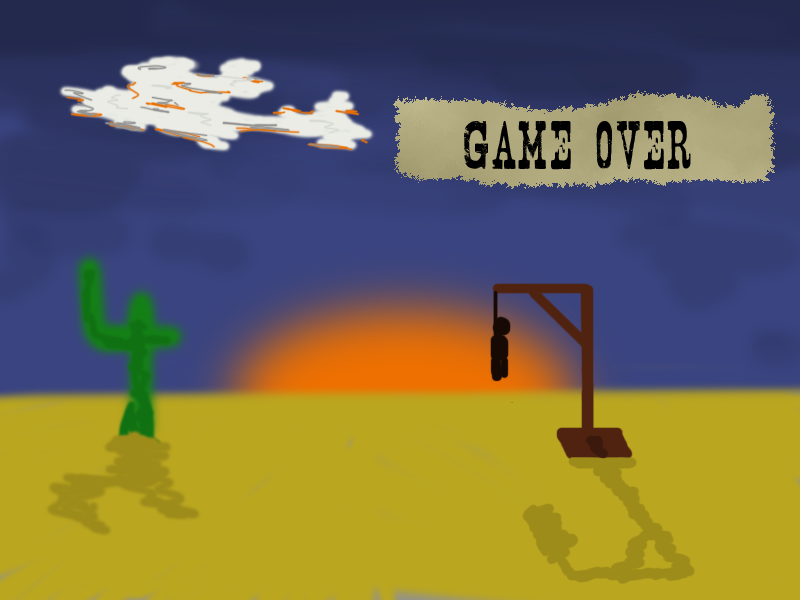
<style>
.page{position:relative;width:800px;height:600px;background:#baa61f}
.page>*{position:absolute;margin:0}
.t1{font:60px "Nashville";color:#000000}
</style>
<div class="page">
<p class="t1" style="left:464px;top:121px;width:227px;height:49px">Game over</p>
</div>
